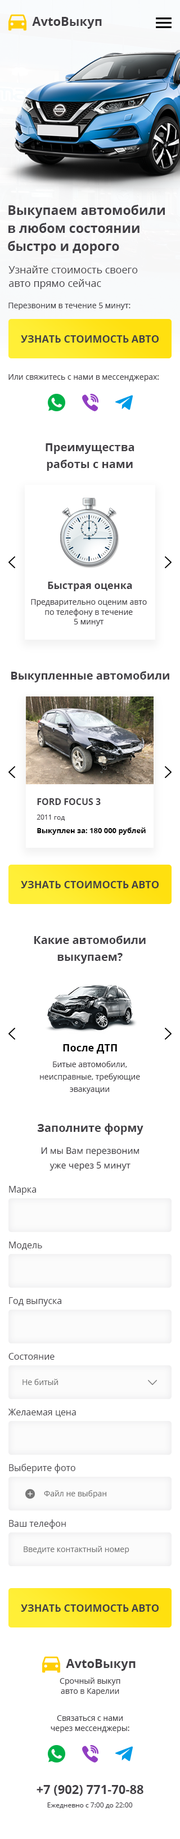
<style>
.page{position:relative;width:180px;height:1839px;background:#ffffff}
.page>*{position:absolute;margin:0}
.t1{font:12.4px "OpenSans-Bold";color:#424045}
.t2{font:12.9px/18px "OpenSans-Bold";color:#424045}
.t3{font:10.1px/13.5px "OpenSans";color:#424045}
.t4{font:7.9px "OpenSans";color:#424045}
.t5{font:10.1px "OpenSans-Bold";color:#424045;text-transform:uppercase}
.t6{font:11.2px/16.9px "OpenSans-Bold";color:#424045}
.t7{font:10.1px "OpenSans-Bold";color:#424045}
.t8{font:7.9px/9.8px "OpenSans";color:#424045}
.t9{font:11.2px "OpenSans-Bold";color:#424045}
.t10{font:9px "OpenSans-Bold";color:#424045;text-transform:uppercase}
.t11{font:6.8px "OpenSans";color:#424045}
.t12{font:7.3px "OpenSans-Bold";color:#000000}
.t13{font:10.1px "OpenSans-Bold";color:#000000}
.t14{font:7.9px/12.4px "OpenSans";color:#424045}
.t15{font:9px/14.6px "OpenSans";color:#424045}
.t16{font:9px "OpenSans";color:#424045}
.t17{font:7.9px "OpenSans";color:#777777}
.t18{font:7.9px/10.1px "OpenSans";color:#424045}
</style>
<div class="page">
<p class="t1" style="left:32px;top:17px;width:70px;height:12px">AvtoВыкуп</p>
<p class="t2" style="left:8px;top:205px;width:157px;height:49px">Выкупаем автомобили в любом состоянии быстро и дорого</p>
<p class="t3" style="left:8px;top:266px;width:130px;height:23px">Узнайте стоимость своего <br>авто прямо сейчас</p>
<p class="t4" style="left:8px;top:303px;width:122px;height:7px">Перезвоним в течение 5 минут:</p>
<p class="t5" style="left:21px;top:335px;width:138px;height:8px">Узнать стоимость авто</p>
<p class="t4" style="left:8px;top:374px;width:151px;height:7px">Или свяжитесь с нами в мессенджерах:</p>
<p class="t6" style="left:46px;top:443px;width:88px;height:28px;text-align:center">Преимущества работы с нами</p>
<p class="t7" style="left:48px;top:582px;width:84px;height:9px">Быстрая оценка</p>
<p class="t8" style="left:31px;top:599px;width:116px;height:27px;text-align:center">Предварительно оценим авто <br>по телефону в течение <br>5 минут</p>
<p class="t9" style="left:11px;top:671px;width:158px;height:11px">Выкупленные автомобили</p>
<p class="t10" style="left:37px;top:798px;width:64px;height:7px">Ford Focus 3</p>
<p class="t11" style="left:37px;top:814px;width:28px;height:7px">2011 год</p>
<p class="t12" style="left:37px;top:827px;width:109px;height:8px">Выкуплен за: 180 000 рублей</p>
<p class="t5" style="left:21px;top:881px;width:138px;height:7px">Узнать стоимость авто</p>
<p class="t6" style="left:34px;top:935px;width:112px;height:29px;text-align:center">Какие автомобили выкупаем?</p>
<p class="t13" style="left:63px;top:1044px;width:54px;height:10px">После ДТП</p>
<p class="t14" style="left:40px;top:1061px;width:100px;height:33px;text-align:center">Битые автомобили, неисправные, требующие эвакуации</p>
<p class="t9" style="left:38px;top:1123px;width:105px;height:12px">Заполните форму</p>
<p class="t15" style="left:41px;top:1147px;width:99px;height:24px;text-align:center">И мы Вам перезвоним <br>уже через 5 минут</p>
<p class="t16" style="left:9px;top:1186px;width:27px;height:9px">Марка</p>
<p class="t16" style="left:9px;top:1241px;width:33px;height:9px">Модель</p>
<p class="t16" style="left:9px;top:1297px;width:52px;height:9px">Год выпуска</p>
<p class="t16" style="left:8px;top:1353px;width:47px;height:7px">Состояние</p>
<p class="t17" style="left:22px;top:1379px;width:36px;height:6px">Не битый</p>
<p class="t16" style="left:8px;top:1408px;width:68px;height:9px">Желаемая цена</p>
<p class="t16" style="left:9px;top:1464px;width:66px;height:9px">Выберите фото</p>
<p class="t17" style="left:44px;top:1490px;width:62px;height:8px">Файл не выбран</p>
<p class="t16" style="left:9px;top:1519px;width:57px;height:10px">Ваш телефон</p>
<p class="t17" style="left:24px;top:1546px;width:105px;height:8px">Введите контактный номер</p>
<p class="t5" style="left:21px;top:1604px;width:138px;height:8px">Узнать стоимость авто</p>
<p class="t1" style="left:66px;top:1659px;width:70px;height:12px">AvtoВыкуп</p>
<p class="t18" style="left:60px;top:1677px;width:60px;height:18px;text-align:center">Срочный выкуп <br>авто в Карелии</p>
<p class="t18" style="left:51px;top:1715px;width:78px;height:17px;text-align:center">Связаться с нами через мессенджеры:</p>
<p class="t1" style="left:37px;top:1785px;width:106px;height:11px">+7 (902) 771-70-88</p>
<p class="t11" style="left:47px;top:1802px;width:86px;height:6px">Ежедневно с 7:00 до 22:00</p>
</div>
